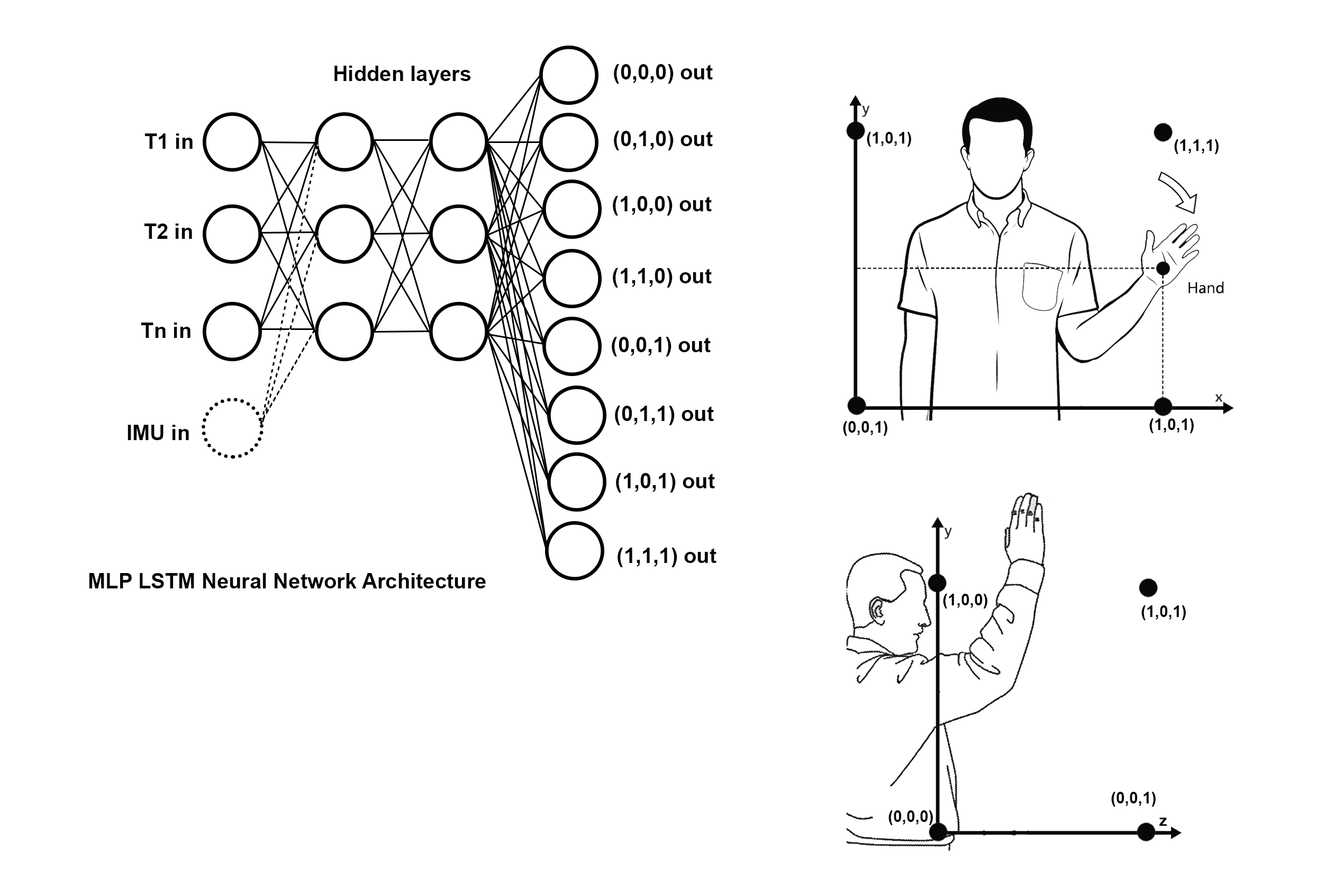
<style>
.page{position:relative;width:1334px;height:894px;background:#ffffff}
.page>*{position:absolute;margin:0}
.t1{font:21.2px "Arial-BoldMT";color:#070007}
.t2{font:15.9px "Arial-BoldMT";color:#070007}
</style>
<div class="page">
<p class="t1" style="left:335px;top:66px;width:136px;height:19px">Hidden layers</p>
<p class="t1" style="left:614px;top:64px;width:99px;height:20px">(0,0,0) out</p>
<p class="t1" style="left:145px;top:133px;width:48px;height:16px">T1 in</p>
<p class="t1" style="left:614px;top:131px;width:99px;height:19px">(0,1,0) out</p>
<p class="t2" style="left:867px;top:132px;width:45px;height:15px">(1,0,1)</p>
<p class="t2" style="left:1175px;top:139px;width:44px;height:15px">(1,1,1)</p>
<p class="t1" style="left:613px;top:196px;width:99px;height:19px">(1,0,0) out</p>
<p class="t1" style="left:144px;top:223px;width:48px;height:16px">T2 in</p>
<p class="t1" style="left:613px;top:268px;width:99px;height:19px">(1,1,0) out</p>
<p class="t1" style="left:141px;top:322px;width:50px;height:16px">Tn in</p>
<p class="t1" style="left:612px;top:337px;width:99px;height:19px">(0,0,1) out</p>
<p class="t1" style="left:615px;top:405px;width:99px;height:20px">(0,1,1) out</p>
<p class="t1" style="left:128px;top:425px;width:61px;height:15px">IMU in</p>
<p class="t2" style="left:843px;top:421px;width:45px;height:15px">(0,0,1)</p>
<p class="t2" style="left:1150px;top:418px;width:44px;height:15px">(1,0,1)</p>
<p class="t1" style="left:616px;top:473px;width:99px;height:19px">(1,0,1) out</p>
<p class="t1" style="left:618px;top:547px;width:99px;height:20px">(1,1,1) out</p>
<p class="t1" style="left:89px;top:573px;width:397px;height:15px">MLP LSTM Neural Network Architecture</p>
<p class="t2" style="left:943px;top:593px;width:45px;height:15px">(1,0,0)</p>
<p class="t2" style="left:1142px;top:605px;width:44px;height:15px">(1,0,1)</p>
<p class="t2" style="left:1112px;top:791px;width:44px;height:15px">(0,0,1)</p>
<p class="t2" style="left:889px;top:810px;width:44px;height:15px">(0,0,0)</p>
</div>
